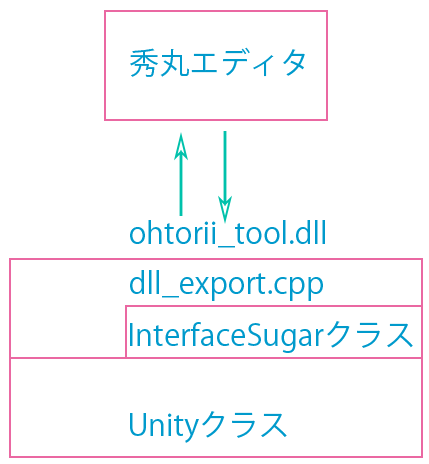
<style>
.page{position:relative;width:429px;height:464px;background:#ffffff}
.page>*{position:absolute;margin:0}
.t1{font:30px "KozGoPr6N-Regular";color:#009acc}
.t2{font:30.1px "KozGoPr6N-Regular";color:#009acc}
</style>
<div class="page">
<p class="t1" style="left:130px;top:47px;width:175px;height:30px">秀丸エディタ</p>
<p class="t1" style="left:130px;top:220px;width:195px;height:28px">ohtorii_tool.dll</p>
<p class="t1" style="left:130px;top:270px;width:193px;height:31px">dll_export.cpp</p>
<p class="t2" style="left:130px;top:321px;width:283px;height:32px">InterfaceSugarクラス</p>
<p class="t1" style="left:130px;top:411px;width:157px;height:32px">Unityクラス</p>
</div>
